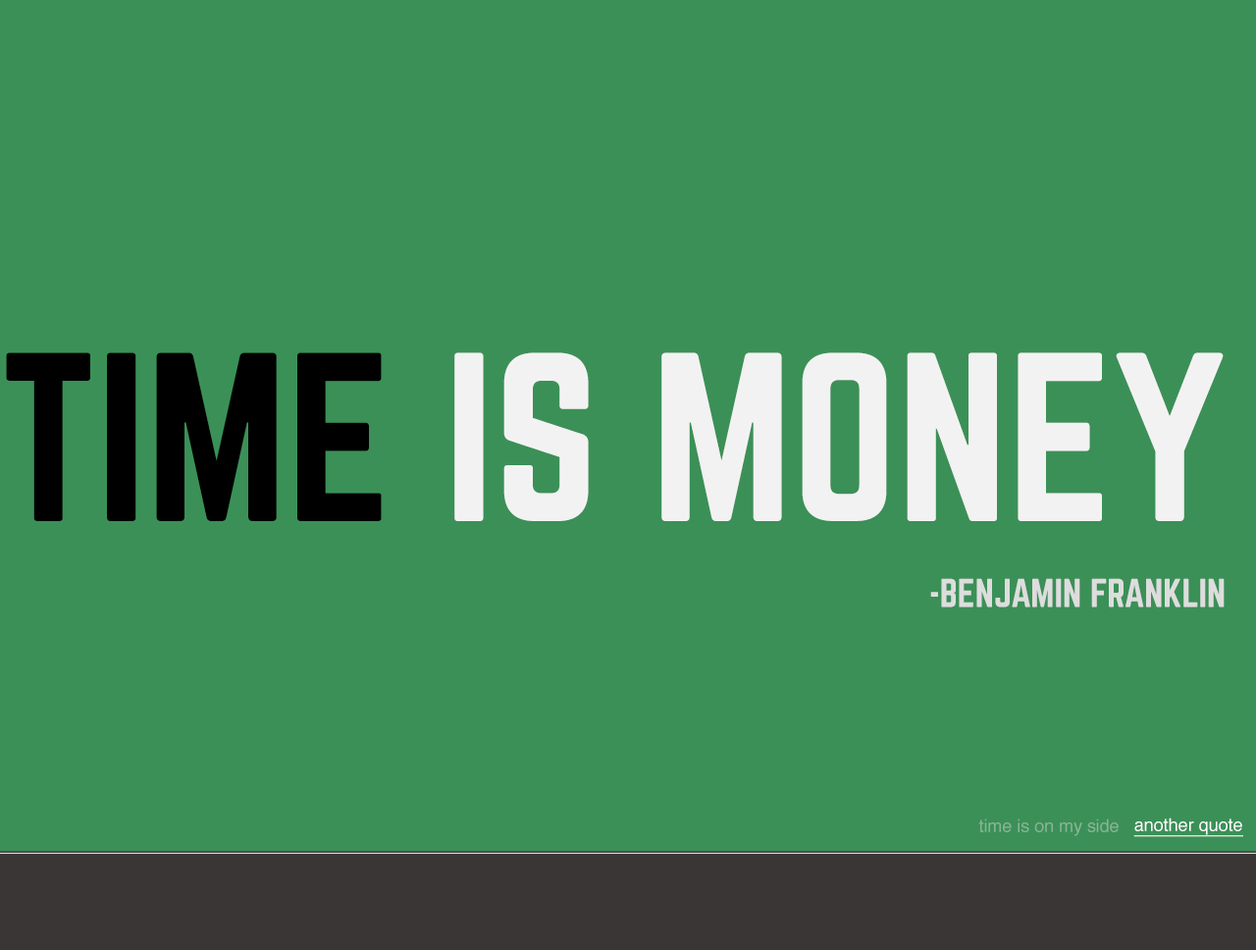
<style>
.page{position:relative;width:1256px;height:950px;background:#3b9057}
.page>*{position:absolute;margin:0}
.t1{font:209.9px "Norwester-Regular";color:#f2f2f2}
.t2{font:209.9px "Norwester-Regular";color:#000000}
.t3{font:35.3px "Norwester-Regular";color:#dddddd}
.t4{font:17.7px "Helvetica";color:#89b696}
.t5{font:17.7px "Helvetica";color:#ffffff;text-decoration:underline}
</style>
<div class="page">
<p class="t1" style="left:6px;top:352px;width:1217px;height:169px"><span class="t2">TIME </span>IS MONEY</p>
<p class="t3" style="left:930px;top:578px;width:294px;height:29px">-BENJAMIN FRANKLIN</p>
<p class="t4" style="left:978px;top:818px;width:140px;height:18px">time is on my side</p>
<p class="t5" style="left:1133px;top:817px;width:110px;height:20px">another quote</p>
</div>
